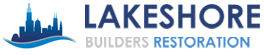
<style>
.page{position:relative;width:264px;height:55px;background:#ffffff}
.page>*{position:absolute;margin:0}
.t1{font:32.2px "CenturyGothic-Bold";color:#284075}
.t2{font:14.8px "CenturyGothic-Bold";color:#448ccb}
.t3{font:14.8px "CenturyGothic-Bold";color:#c2c2c2}
</style>
<div class="page">
<p class="t1" style="left:85px;top:4px;width:175px;height:25px">LAKESHORE</p>
<p class="t2" style="left:86px;top:37px;width:164px;height:11px"><span class="t3">BUILDERS </span>RESTORATION</p>
</div>
